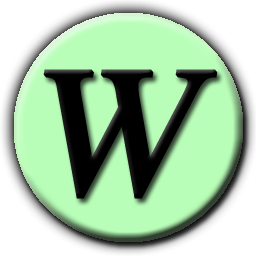
<style>
.page{position:relative;width:256px;height:256px;background:#b8feb8}
.page>*{position:absolute;margin:0}
.t1{font:182px "TimesNewRomanPSMT";letter-spacing:-0.08em;color:#000000;font-weight:bold;font-style:italic}
</style>
<div class="page">
<p class="t1" style="left:43px;top:69px;width:175px;height:130px">W</p>
</div>
